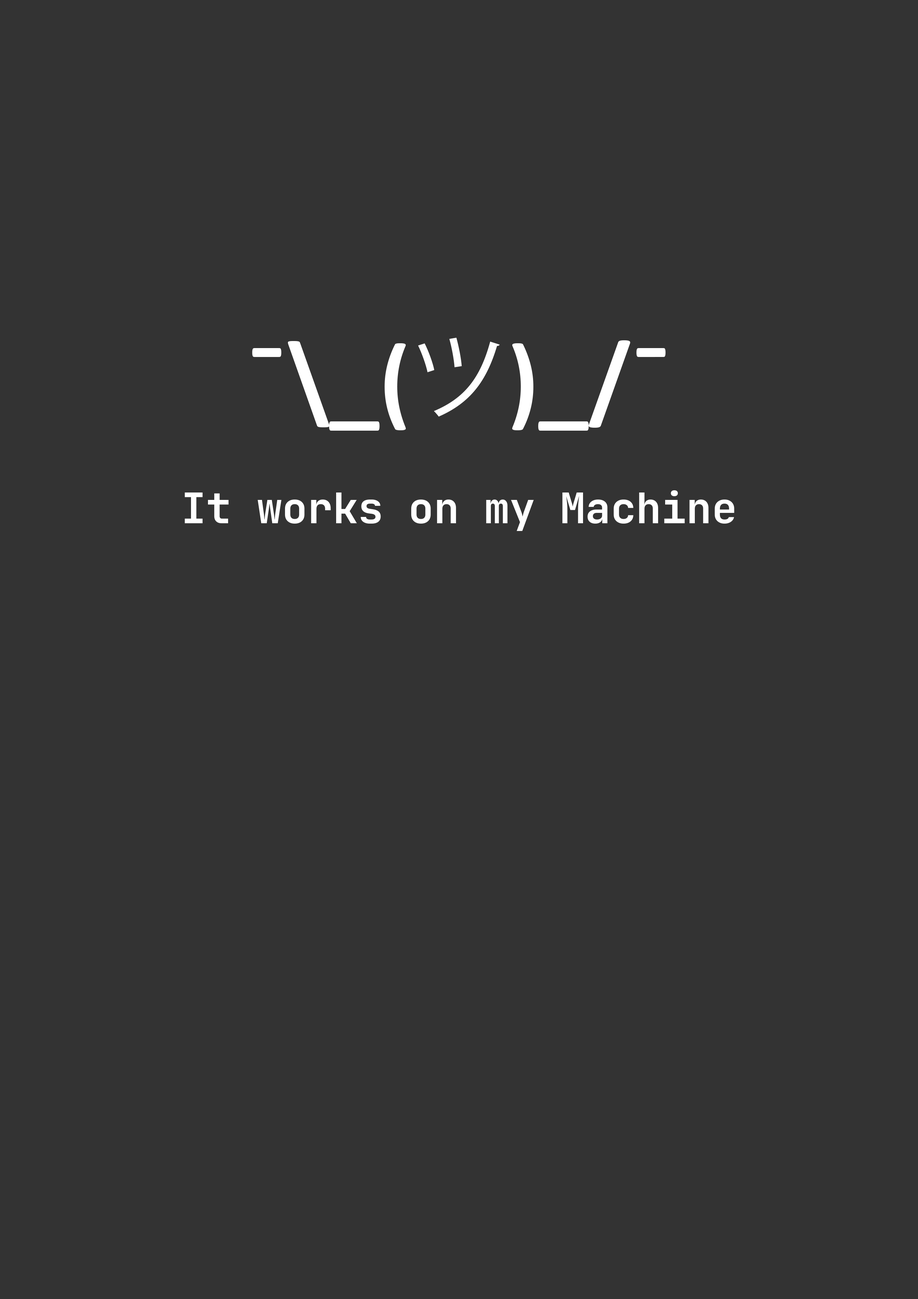
<style>
.page{position:relative;width:918px;height:1299px;background:#333333}
.page>*{position:absolute;margin:0}
.t1{font:100.1px "Calibri-Bold";color:#ffffff}
.t2{font:100.1px "KozGoPr6N-Regular";color:#ffffff}
.t3{font:42.2px "JetBrainsMono-Bold";color:#ffffff}
</style>
<div class="page">
<p class="t1" style="left:252px;top:338px;width:414px;height:93px">¯\_(<span class="t2">ツ</span>)_/¯</p>
<p class="t3" style="left:185px;top:490px;width:550px;height:41px">It works on my Machine</p>
</div>
